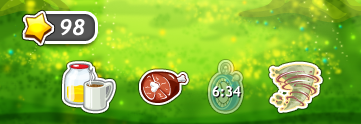
<style>
.page{position:relative;width:361px;height:124px}
.page>*{position:absolute;margin:0}
.t1{font:21.9px "Trebuchet-BoldItalic";color:#ffffff}
.t2{font:14px "TrebuchetMS";color:#ffffff;font-weight:bold}
</style>
<div class="page">
<p class="t1" style="left:60px;top:19px;width:25px;height:17px">98</p>
<p class="t2" style="left:212px;top:86px;width:29px;height:11px">6:34</p>
</div>
